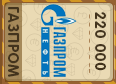
<style>
.page{position:relative;width:116px;height:84px;background:#eadab4}
.page>*{position:absolute;margin:0}
.t1{font:15px "RotondaC-Bold";letter-spacing:0.04em;color:#43341d;text-transform:uppercase}
</style>
<div class="page">
<p class="t1" style="left:8px;top:7px;width:11px;height:70px;rotate:90deg">газпром</p>
<p class="t1" style="left:95px;top:12px;width:11px;height:59px;rotate:90deg">220 000</p>
</div>
